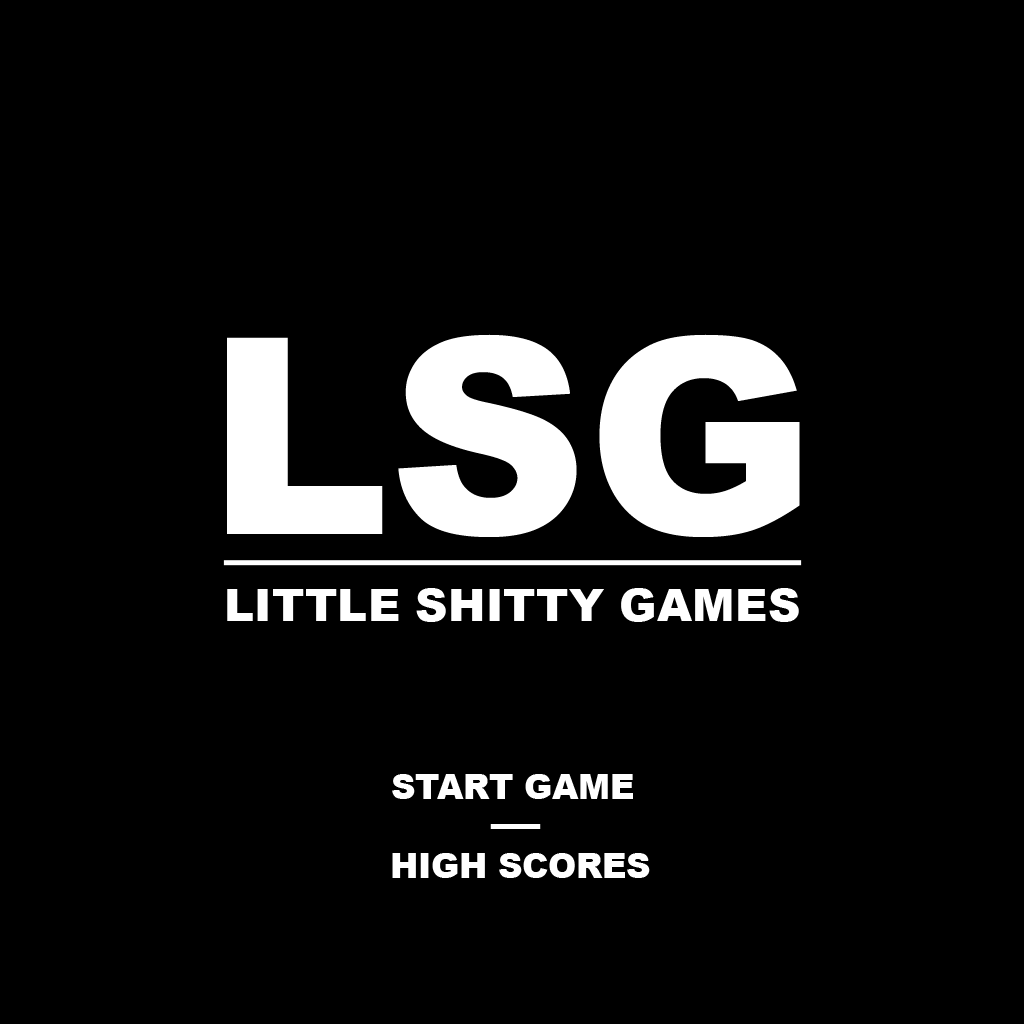
<style>
.page{position:relative;width:1024px;height:1024px;background:#000000}
.page>*{position:absolute;margin:0}
.t1{font:45.3px "Arial-Black";color:#ffffff}
.t2{font:33.5px "Arial-Black";color:#ffffff}
</style>
<div class="page">
<p class="t1" style="left:227px;top:588px;width:572px;height:34px">LITTLE SHITTY GAMES</p>
<p class="t2" style="left:392px;top:774px;width:241px;height:25px">START GAME</p>
<p class="t2" style="left:392px;top:853px;width:258px;height:25px">HIGH SCORES</p>
</div>
